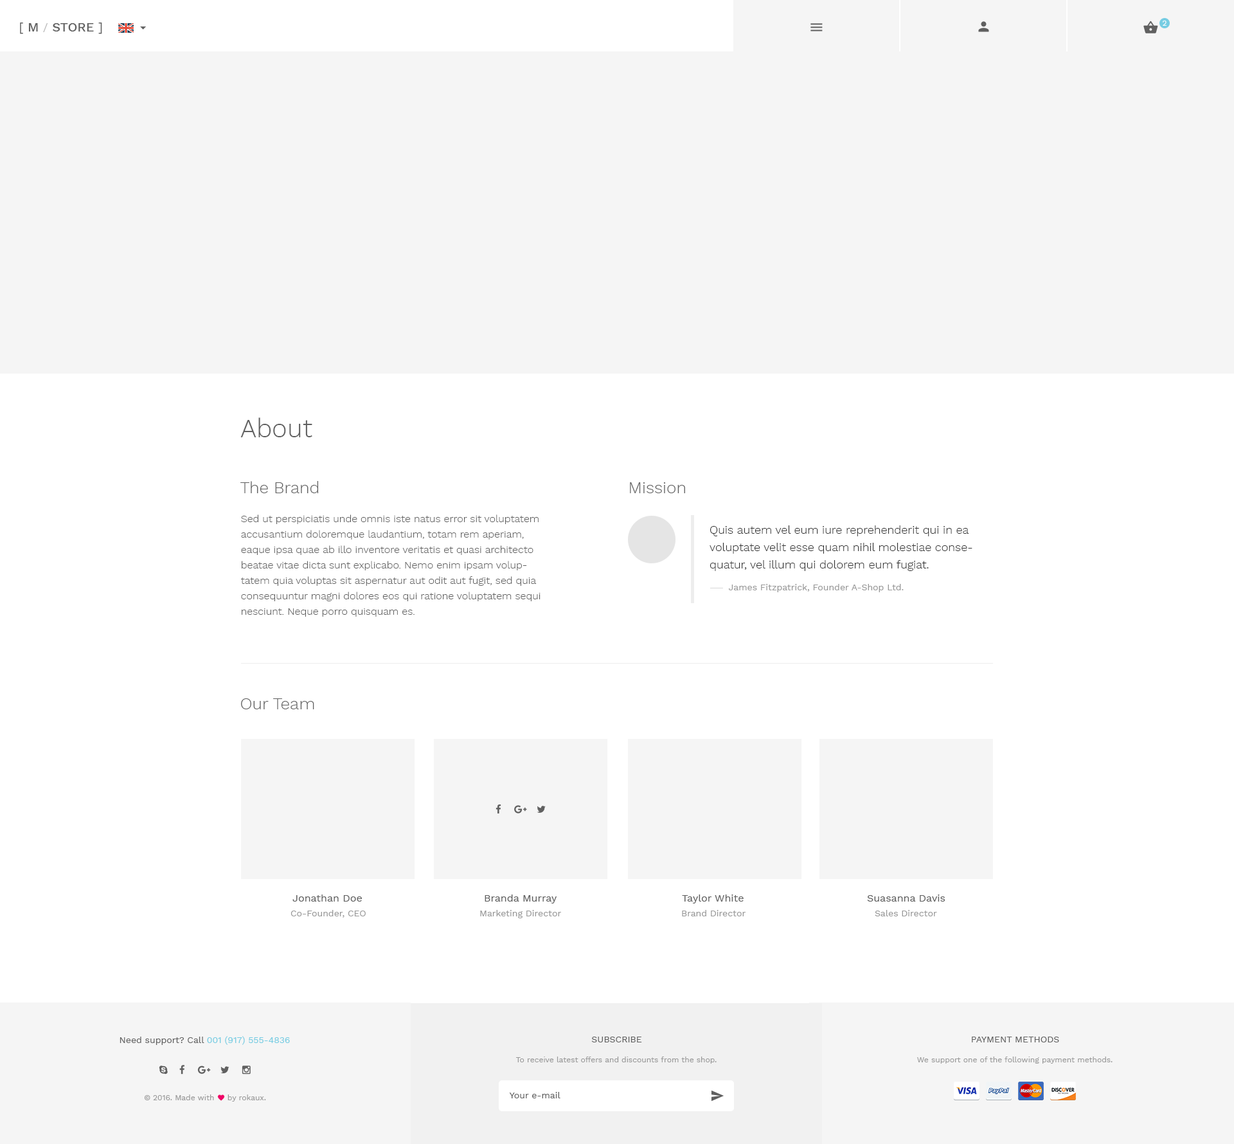
<style>
.page{position:relative;width:1234px;height:1144px;background:#ffffff}
.page>*{position:absolute;margin:0}
.t1{font:12.9px "WorkSans-Medium";color:#606060}
.t2{font:12.9px "WorkSans-Regular";color:#606060}
.t3{font:11.6px "WorkSans-Regular";color:#bababa}
.t4{font:7.7px "WorkSans-Regular";color:#fffefe}
.t5{font:25.7px "WorkSans-Light";color:#606060}
.t6{font:16.7px "WorkSans-Light";color:#606060}
.t7{font:10.3px/15.4px "WorkSans-Light";color:#606060}
.t8{font:11.6px/17.4px "WorkSans-Light";color:#333333}
.t9{font:9px "WorkSans-Regular";color:#999999}
.t10{font:10.3px "WorkSans-Regular";color:#606060}
.t11{font:9px "WorkSans-Regular";color:#606060}
.t12{font:9px "WorkSans-Regular";color:#77cde3}
.t13{font:9px "WorkSans-Regular";color:#606060;text-transform:uppercase}
.t14{font:7.7px "WorkSans-Regular";color:#999999}
</style>
<div class="page">
<p class="t1" style="left:20px;top:22px;width:82px;height:12px"><span class="t2">[</span> M <span class="t3">/ </span>STORE <span class="t2">]</span></p>
<p class="t4" style="left:1163px;top:21px;width:4px;height:5px">2</p>
<p class="t5" style="left:240px;top:417px;width:72px;height:20px">About</p>
<p class="t6" style="left:240px;top:481px;width:79px;height:12px">The Brand</p>
<p class="t6" style="left:630px;top:482px;width:55px;height:11px">Mission</p>
<p class="t7" style="left:241px;top:514px;width:300px;height:102px">Sed ut perspiciatis unde omnis iste natus error sit voluptatem accusantium doloremque laudantium, totam rem aperiam, eaque ipsa quae ab illo inventore veritatis et quasi architecto beatae vitae dicta sunt explicabo. Nemo enim ipsam voluptatem quia voluptas sit aspernatur aut odit aut fugit, sed quia consequuntur magni dolores eos qui ratione voluptatem sequi nesciunt. Neque porro quisquam es.</p>
<p class="t8" style="left:710px;top:525px;width:263px;height:46px">Quis autem vel eum iure reprehenderit qui in ea voluptate velit esse quam nihil molestiae consequatur, vel illum qui dolorem eum fugiat.</p>
<p class="t9" style="left:729px;top:584px;width:175px;height:8px">James Fitzpatrick, Founder A-Shop Ltd.</p>
<p class="t6" style="left:241px;top:698px;width:73px;height:11px">Our Team</p>
<p class="t10" style="left:292px;top:894px;width:70px;height:7px">Jonathan Doe</p>
<p class="t10" style="left:485px;top:894px;width:72px;height:9px">Branda Murray</p>
<p class="t10" style="left:682px;top:894px;width:62px;height:9px">Taylor White</p>
<p class="t10" style="left:867px;top:894px;width:79px;height:7px">Suasanna Davis</p>
<p class="t9" style="left:291px;top:910px;width:75px;height:7px">Co-Founder, CEO</p>
<p class="t9" style="left:480px;top:910px;width:81px;height:8px">Marketing Director</p>
<p class="t9" style="left:682px;top:910px;width:64px;height:6px">Brand Director</p>
<p class="t9" style="left:875px;top:910px;width:62px;height:6px">Sales Director</p>
<p class="t11" style="left:120px;top:1036px;width:170px;height:9px">Need support? Call <span class="t12">001 (917) 555-4836</span></p>
<p class="t13" style="left:591px;top:1036px;width:51px;height:6px">Subscribe</p>
<p class="t13" style="left:972px;top:1036px;width:87px;height:6px">Payment Methods</p>
<p class="t14" style="left:516px;top:1056px;width:201px;height:7px">To receive latest offers and discounts from the shop.</p>
<p class="t14" style="left:917px;top:1056px;width:196px;height:7px">We support one of the following payment methods.</p>
<p class="t14" style="left:144px;top:1094px;width:122px;height:7px">© 2016. Made with     by rokaux.</p>
<p class="t11" style="left:509px;top:1092px;width:52px;height:6px">Your e-mail</p>
</div>
